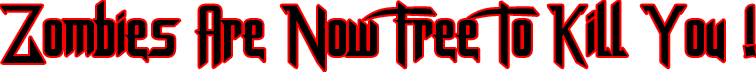
<style>
.page{position:relative;width:756px;height:72px;background:#ffffff}
.page>*{position:absolute;margin:0}
.t1{font:72px "DragonForcE";color:#000000}
</style>
<div class="page">
<p class="t1" style="left:0px;top:0px;width:756px;height:72px">Zombies Are Now Free To Kill You !</p>
</div>
